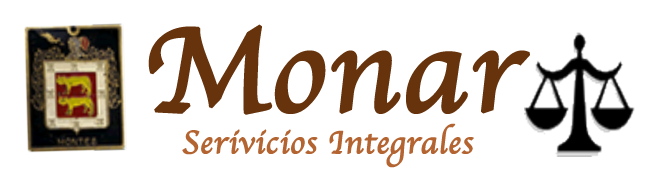
<style>
.page{position:relative;width:654px;height:179px;background:#ffffff}
.page>*{position:absolute;margin:0}
.t1{font:125px "Apple-Chancery";color:#66330d;font-weight:bold}
.t2{font:33.3px "Apple-Chancery";color:#b36431;font-weight:bold}
</style>
<div class="page">
<p class="t1" style="left:148px;top:24px;width:382px;height:91px">Monar</p>
<p class="t2" style="left:182px;top:123px;width:292px;height:45px">Serivicios Integrales</p>
</div>
